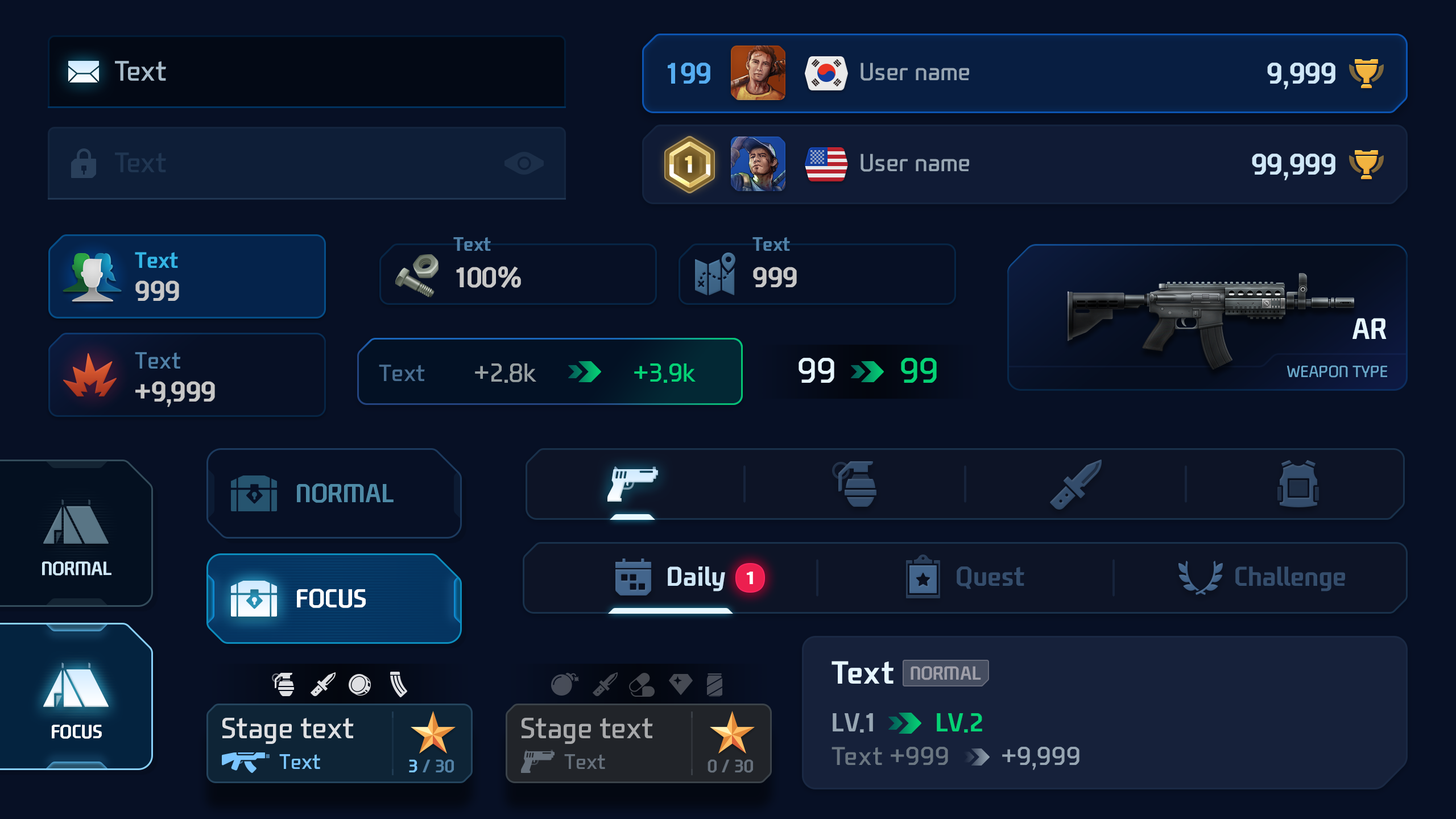
<style>
.page{position:relative;width:1456px;height:819px;background:#071025}
.page>*{position:absolute;margin:0}
.t1{font:27.3px "NEXONFootballGothicL";color:#a7bbca}
.t2{font:28.4px "NEXONFootballGothicB";color:#56adf1}
.t3{font:23.9px/91px "NEXONFootballGothicL";color:#97a6b3}
.t4{font:28.4px/91px "NEXONFootballGothicB";color:#cfe7f7}
.t5{font:27.3px "NEXONFootballGothicL";color:#203652}
.t6{font:18.8px "NEXONFootballGothicB";color:#5081a8}
.t7{font:21.6px "NEXONFootballGothicB";color:#34b5e5}
.t8{font:27.3px "NEXONFootballGothicB";color:#c7c7c7}
.t9{font:28.4px "NEXONFootballGothicB";color:#e6f6ff;text-transform:uppercase}
.t10{font:22.7px "NEXONFootballGothicL";color:#5081a8}
.t11{font:22.7px "NEXONFootballGothicL";color:#496e91}
.t12{font:25px "NEXONFootballGothicL";color:#979fa1}
.t13{font:25px "NEXONFootballGothicL";color:#05d275}
.t14{font:34.1px "NEXONFootballGothicL";color:#e6f6ff}
.t15{font:34.1px "NEXONFootballGothicL";color:#05d275}
.t16{font:15.9px "NEXONFootballGothicL";color:#69a8ca;text-transform:uppercase}
.t17{font:25px "NEXONFootballGothicB";color:#4e8aa6;text-transform:uppercase}
.t18{font:18.2px "NEXONFootballGothicB";color:#cfe7f7;text-transform:uppercase}
.t19{font:26.2px "NEXONFootballGothicB";color:#cfe7f7}
.t20{font:26.2px "NEXONFootballGothicB";color:#344d6c}
.t21{font:17.2px "NEXONFootballGothicB";color:#ffffff;text-transform:uppercase;scale:1.37 1}
.t22{font:25px "NEXONFootballGothicB";color:#ffffff;text-transform:uppercase}
.t23{font:30.7px "NEXONFootballGothicB";color:#e6f6ff}
.t24{font:18.2px "NEXONFootballGothicB";color:#9e9ea8;text-transform:uppercase}
.t25{font:25px "NEXONFootballGothicB";color:#97a6b3}
.t26{font:25px "NEXONFootballGothicB";color:#05d275}
.t27{font:18.2px "NEXONFootballGothicB";color:#ffffff;text-transform:uppercase}
.t28{font:28.4px "NEXONFootballGothicL";color:#dedfe2}
.t29{font:28.4px "NEXONFootballGothicL";color:#a8a9ab}
.t30{font:25px "NEXONFootballGothicL";color:#6a7681}
.t31{font:25px "NEXONFootballGothicL";color:#97a6b3}
.t32{font:20.5px "NEXONFootballGothicL";color:#7bc5ff}
.t33{font:17.5px "NEXONFootballGothicB";color:#5281a5;text-transform:uppercase}
.t34{font:17.5px "NEXONFootballGothicB";color:#7bc5ff;text-transform:uppercase}
.t35{font:20.5px "NEXONFootballGothicL";color:#66707b}
.t36{font:17.5px "NEXONFootballGothicB";color:#66707b;text-transform:uppercase}
</style>
<div class="page">
<p class="t1" style="left:115px;top:61px;width:51px;height:20px">Text</p>
<p class="t2" style="left:668px;top:63px;width:42px;height:21px">199</p>
<p class="t3" style="left:861px;top:63px;width:108px;height:109px">User name<br>User name</p>
<p class="t4" style="left:1252px;top:63px;width:83px;height:117px;text-align:right">9,999<br>99,999</p>
<p class="t5" style="left:115px;top:152px;width:51px;height:20px">Text</p>
<p class="t6" style="left:453px;top:237px;width:38px;height:14px">Text</p>
<p class="t6" style="left:752px;top:237px;width:38px;height:14px">Text</p>
<p class="t7" style="left:135px;top:252px;width:43px;height:16px">Text</p>
<p class="t8" style="left:456px;top:266px;width:65px;height:22px">100%</p>
<p class="t8" style="left:753px;top:267px;width:44px;height:20px">999</p>
<p class="t8" style="left:135px;top:280px;width:44px;height:21px">999</p>
<p class="t9" style="left:1352px;top:318px;width:35px;height:21px">AR</p>
<p class="t10" style="left:135px;top:352px;width:46px;height:17px">Text</p>
<p class="t11" style="left:379px;top:365px;width:46px;height:16px">Text</p>
<p class="t12" style="left:475px;top:363px;width:61px;height:20px">+2.8k</p>
<p class="t13" style="left:634px;top:363px;width:62px;height:20px">+3.9k</p>
<p class="t14" style="left:799px;top:358px;width:35px;height:25px">99</p>
<p class="t15" style="left:901px;top:358px;width:36px;height:25px">99</p>
<p class="t16" style="left:1286px;top:365px;width:101px;height:13px">Weapon Type</p>
<p class="t8" style="left:135px;top:381px;width:80px;height:26px">+9,999</p>
<p class="t17" style="left:297px;top:483px;width:97px;height:20px">normal</p>
<p class="t18" style="left:42px;top:561px;width:69px;height:15px">normal</p>
<p class="t19" style="left:668px;top:566px;width:57px;height:25px">Daily</p>
<p class="t20" style="left:957px;top:566px;width:67px;height:23px">Quest</p>
<p class="t20" style="left:1235px;top:566px;width:110px;height:25px">Challenge</p>
<p class="t21" style="left:747px;top:572px;width:6px;height:12px">1</p>
<p class="t22" style="left:297px;top:589px;width:69px;height:19px">Focus</p>
<p class="t23" style="left:832px;top:661px;width:61px;height:23px">Text</p>
<p class="t24" style="left:911px;top:666px;width:70px;height:14px">NORMAL</p>
<p class="t25" style="left:833px;top:713px;width:149px;height:20px">LV.1         <span class="t26">LV.2</span></p>
<p class="t27" style="left:52px;top:725px;width:50px;height:14px">focus</p>
<p class="t28" style="left:222px;top:718px;width:132px;height:26px">Stage text</p>
<p class="t29" style="left:522px;top:718px;width:131px;height:26px">Stage text</p>
<p class="t30" style="left:832px;top:747px;width:247px;height:23px">Text +999        <span class="t31">+9,999</span></p>
<p class="t32" style="left:279px;top:754px;width:41px;height:15px">Text</p>
<p class="t33" style="left:409px;top:759px;width:45px;height:14px"><span class="t34">3 </span>/ 30</p>
<p class="t35" style="left:564px;top:754px;width:41px;height:15px">Text</p>
<p class="t36" style="left:708px;top:759px;width:45px;height:14px">0 / 30</p>
</div>
